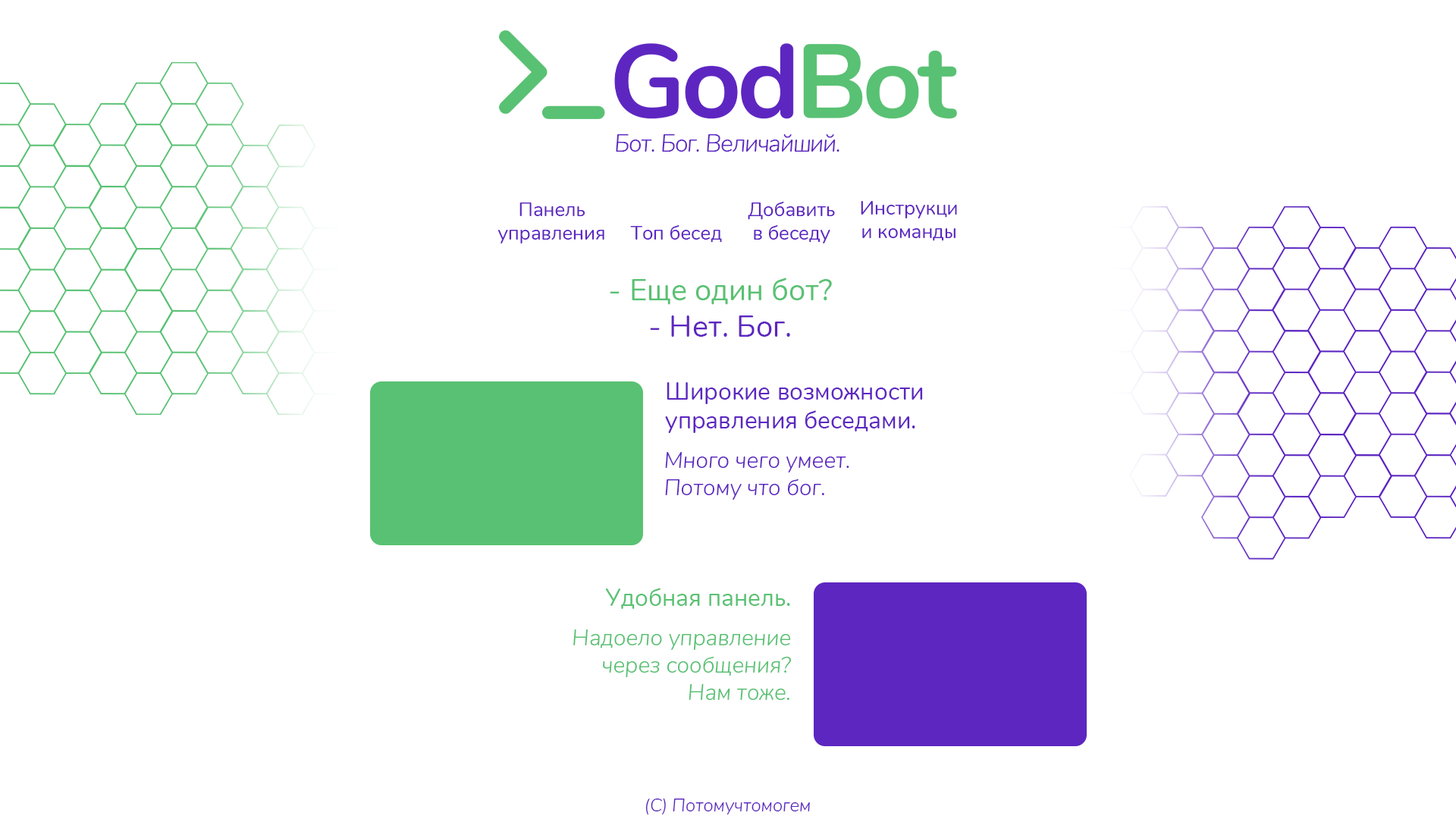
<style>
.page{position:relative;width:1456px;height:819px;background:#ffffff}
.page>*{position:absolute;margin:0}
.t1{font:24.3px "Nunito-LightItalic";letter-spacing:-0.04em;color:#5d26c1}
.t2{font:19.7px "Nunito-Regular";color:#5d26c1}
.t3{font:30.3px "Nunito-Regular";color:#59c173}
.t4{font:30.3px "Nunito-Regular";color:#5d26c1}
.t5{font:24.3px "Nunito-Regular";color:#5d26c1}
.t6{font:22.7px "Nunito-LightItalic";color:#5d26c1}
.t7{font:24.3px "Nunito-Regular";color:#59c173}
.t8{font:22.7px "Nunito-LightItalic";color:#59c173}
.t9{font:18.2px "Nunito-LightItalic";color:#5d26c1}
</style>
<div class="page">
<p class="t1" style="left:616px;top:134px;width:223px;height:18px">Бот. Бог. Величайший.</p>
<p class="t2" style="left:497px;top:202px;width:107px;height:41px;text-align:center">Панель<br>управления</p>
<p class="t2" style="left:748px;top:202px;width:87px;height:41px;text-align:center">Добавить<br>в беседу</p>
<p class="t2" style="left:861px;top:201px;width:96px;height:40px;text-align:center">Инструкци<br>и команды</p>
<p class="t2" style="left:630px;top:225px;width:92px;height:18px">Топ бесед</p>
<p class="t3" style="left:610px;top:278px;width:222px;height:59px;text-align:center">- Еще один бот?<br><span class="t4">- Нет. Бог.</span></p>
<p class="t5" style="left:665px;top:382px;width:258px;height:51px">Широкие возможности<br>управления беседами.</p>
<p class="t6" style="left:665px;top:452px;width:184px;height:48px">Много чего умеет.<br>Потому что бог.</p>
<p class="t7" style="left:605px;top:588px;width:185px;height:21px">Удобная панель.</p>
<p class="t8" style="left:573px;top:629px;width:219px;height:71px;text-align:right">Надоело управление<br>через сообщения?<br>Нам тоже.</p>
<p class="t9" style="left:645px;top:799px;width:165px;height:15px">(C) Потомучтомогем</p>
</div>
